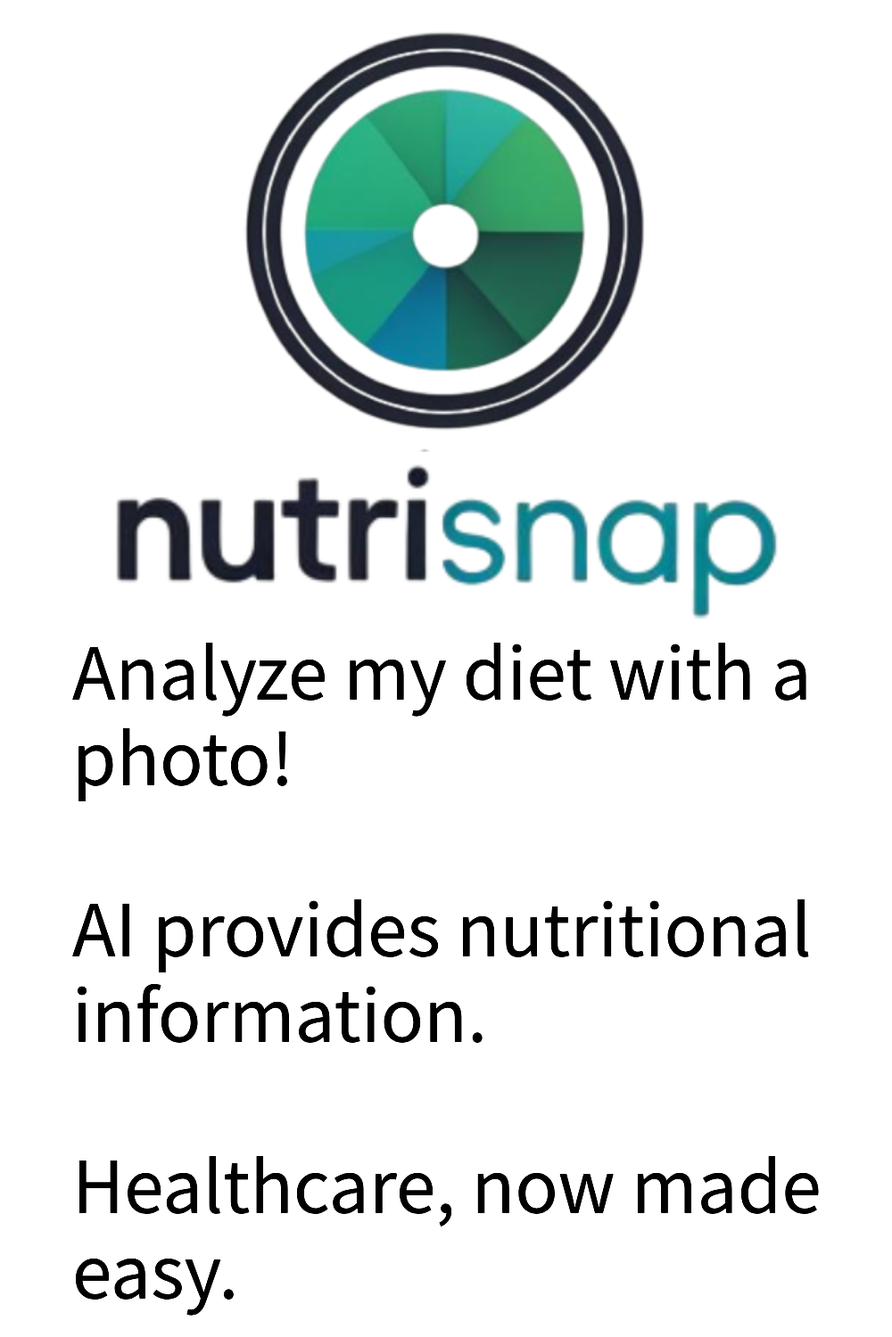
<style>
.page{position:relative;width:892px;height:1337px;background:#ffffff}
.page>*{position:absolute;margin:0}
.t1{font:71.3px "NotoSansKR-Regular";color:#000000}
</style>
<div class="page">
<p class="t1" style="left:72px;top:643px;width:746px;height:673px">Analyze my diet with a photo!<br><br>AI provides nutritional information.<br><br>Healthcare, now made easy.</p>
</div>
